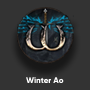
<style>
.page{position:relative;width:90px;height:90px;background:#333333}
.page>*{position:absolute;margin:0}
.t1{font:8.1px "Gilroy-ExtraBold";color:#ffffff}
</style>
<div class="page">
<p class="t1" style="left:26px;top:77px;width:38px;height:6px">Winter Ao</p>
</div>
